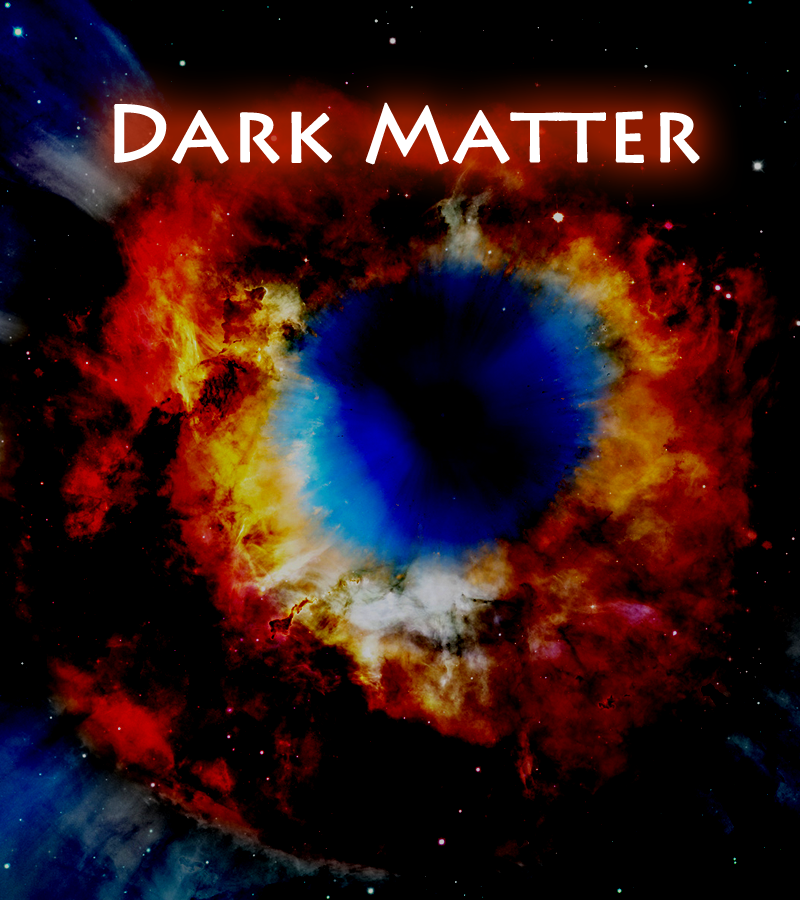
<style>
.page{position:relative;width:800px;height:900px;background:#000000}
.page>*{position:absolute;margin:0}
.t1{font:80px "LithosPro-Regular";color:#ffffff;font-weight:bold}
</style>
<div class="page">
<p class="t1" style="left:114px;top:102px;width:586px;height:63px">Dark Matter</p>
</div>
